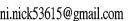
<style>
.page{position:relative;width:138px;height:21px;background:#ffffff}
.page>*{position:absolute;margin:0}
.t1{font:16px "PMingLiU";color:#000000;scale:0.79 1}
</style>
<div class="page">
<p class="t1" style="left:0px;top:6px;width:124px;height:16px">ni.nick53615@gmail.com</p>
</div>
